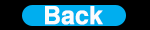
<style>
.page{position:relative;width:150px;height:30px;background:#000000}
.page>*{position:absolute;margin:0}
.t1{font:25px "TeXGyreHeros-Bold";color:#fcfcfc}
</style>
<div class="page">
<p class="t1" style="left:45px;top:6px;width:58px;height:19px">Back</p>
</div>
